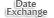
<style>
.page{position:relative;width:54px;height:18px;background:#ffffff}
.page>*{position:absolute;margin:0}
.t1{font:10px/8px "AmiraParadiso";color:#646464}
</style>
<div class="page">
<p class="t1" style="left:7px;top:0px;width:41px;height:17px;text-align:center">Date <br>Exchange</p>
</div>
